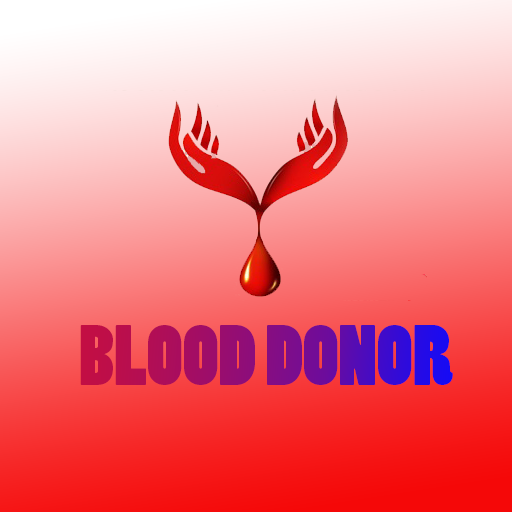
<style>
.page{position:relative;width:512px;height:512px}
.page>*{position:absolute;margin:0}
.t1{font:80px "PoplarStd"}
</style>
<div class="page">
<p class="t1" style="left:80px;top:325px;width:373px;height:60px">BLOOD DONOR</p>
</div>
